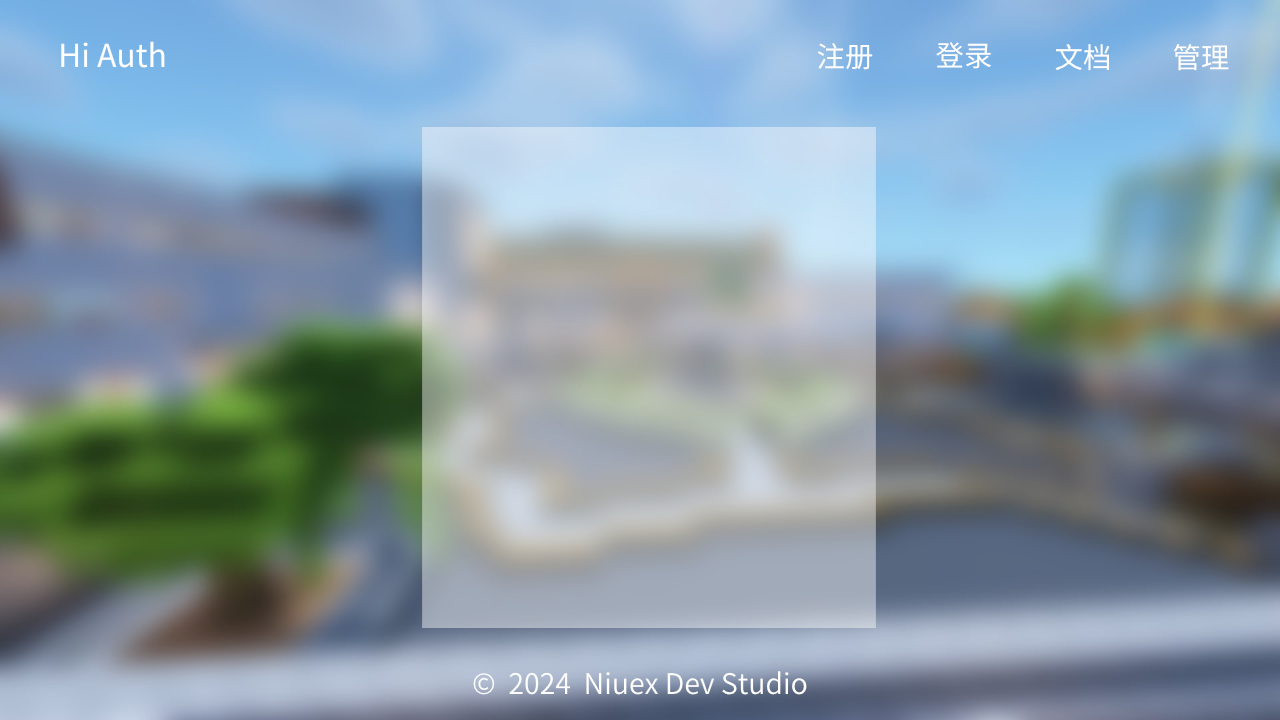
<style>
.page{position:relative;width:1280px;height:720px}
.page>*{position:absolute;margin:0}
.t1{font:31.7px "SourceHanSansSC-Regular";color:#ffffff}
.t2{font:28.5px "SourceHanSansSC-Regular";color:#ffffff}
.t3{font:28.5px "SourceHanSansSC-Normal";color:#ffffff}
</style>
<div class="page">
<p class="t1" style="left:61px;top:41px;width:104px;height:27px">Hi Auth</p>
<p class="t2" style="left:817px;top:43px;width:56px;height:27px">注册</p>
<p class="t2" style="left:936px;top:42px;width:56px;height:27px">登录</p>
<p class="t2" style="left:1055px;top:43px;width:55px;height:28px">文档</p>
<p class="t2" style="left:1173px;top:44px;width:56px;height:27px">管理</p>
<p class="t3" style="left:473px;top:671px;width:334px;height:24px">©  2024  Niuex Dev Studio</p>
</div>
